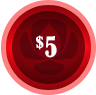
<style>
.page{position:relative;width:96px;height:95px;background:#ffffff}
.page>*{position:absolute;margin:0}
.t1{font:26px "BernardMT-Condensed";letter-spacing:0.06em;color:#fefdfc}
</style>
<div class="page">
<p class="t1" style="left:36px;top:35px;width:21px;height:23px">$5</p>
</div>
